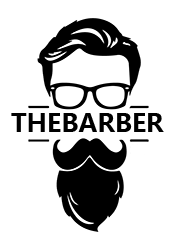
<style>
.page{position:relative;width:177px;height:250px;background:#ffffff}
.page>*{position:absolute;margin:0}
.t1{font:25px "MicrosoftYaHei-Bold";color:#000000}
</style>
<div class="page">
<p class="t1" style="left:11px;top:113px;width:153px;height:19px">THEBARBER</p>
</div>
